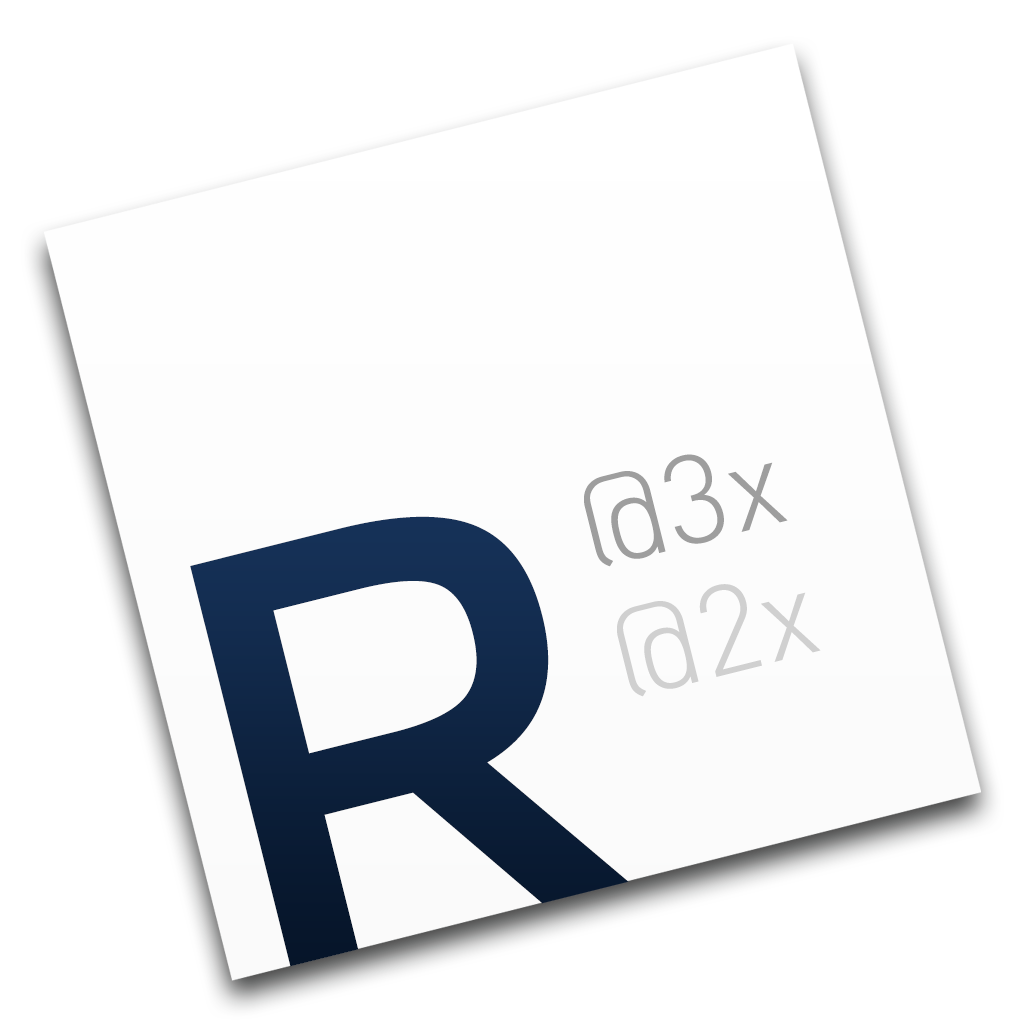
<style>
.page{position:relative;width:1024px;height:1024px;background:#ffffff}
.page>*{position:absolute;margin:0}
.t1{font:123.5px "DIN-Light";color:#9e9e9e}
.t2{font:590px "Montserrat-Regular";color:#0a2141}
.t3{font:123.5px "DIN-Light";color:#d0d0d0}
</style>
<div class="page">
<p class="t1" style="left:584px;top:454px;width:204px;height:113px;rotate:-14deg">@3x</p>
<p class="t2" style="left:190px;top:516px;width:439px;height:451px;rotate:-14deg">R</p>
<p class="t3" style="left:617px;top:584px;width:204px;height:113px;rotate:-14deg">@2x</p>
</div>
